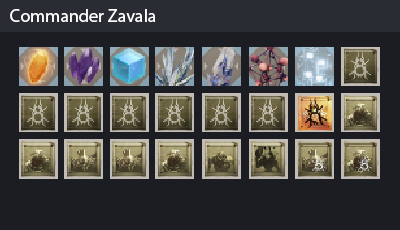
<style>
.page{position:relative;width:400px;height:230px;background:#1b1d23}
.page>*{position:absolute;margin:0}
.t1{font:18px "MyriadPro-Regular";color:#ffffff}
</style>
<div class="page">
<p class="t1" style="left:10px;top:9px;width:146px;height:13px">Commander Zavala</p>
</div>
